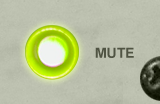
<style>
.page{position:relative;width:160px;height:104px}
.page>*{position:absolute;margin:0}
.t1{font:14px "Arial-BoldMT";color:#505443}
</style>
<div class="page">
<p class="t1" style="left:95px;top:47px;width:39px;height:11px">MUTE</p>
</div>
